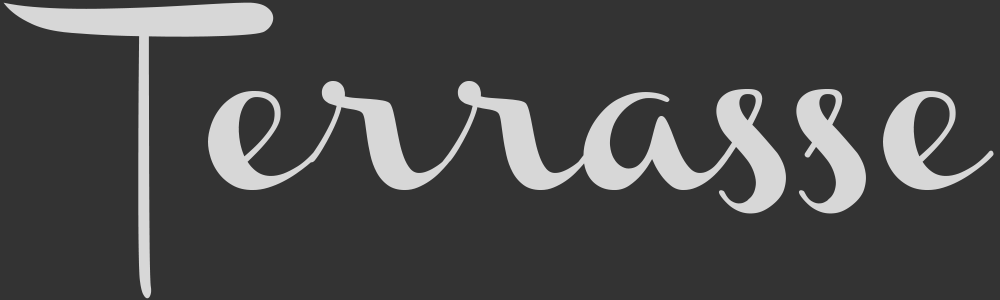
<style>
.page{position:relative;width:1000px;height:300px;background:#333333}
.page>*{position:absolute;margin:0}
.t1{font:158px "Channel";color:#d7d7d7}
</style>
<div class="page">
<p class="t1" style="left:3px;top:2px;width:991px;height:297px">Terrasse</p>
</div>
